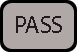
<style>
.page{position:relative;width:77px;height:52px;background:#b0a7a7}
.page>*{position:absolute;margin:0}
.t1{font:24px "MyriadPro-Regular";color:#201a1a}
</style>
<div class="page">
<p class="t1" style="left:16px;top:16px;width:46px;height:17px">PASS</p>
</div>
